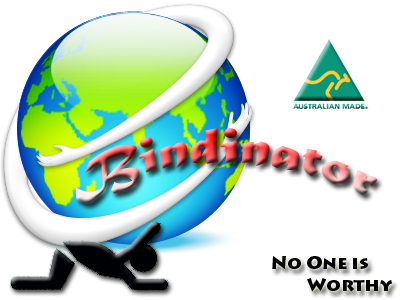
<style>
.page{position:relative;width:400px;height:300px;background:#ffffff}
.page>*{position:absolute;margin:0}
.t1{font:55px "MaturaMTScriptCapitals"}
.t2{font:18px "LithosPro-Black";color:#000000}
</style>
<div class="page">
<p class="t1" style="left:75px;top:128px;width:303px;height:76px">Bindinator</p>
<p class="t2" style="left:272px;top:256px;width:121px;height:36px">No One is<br> Worthy</p>
</div>
